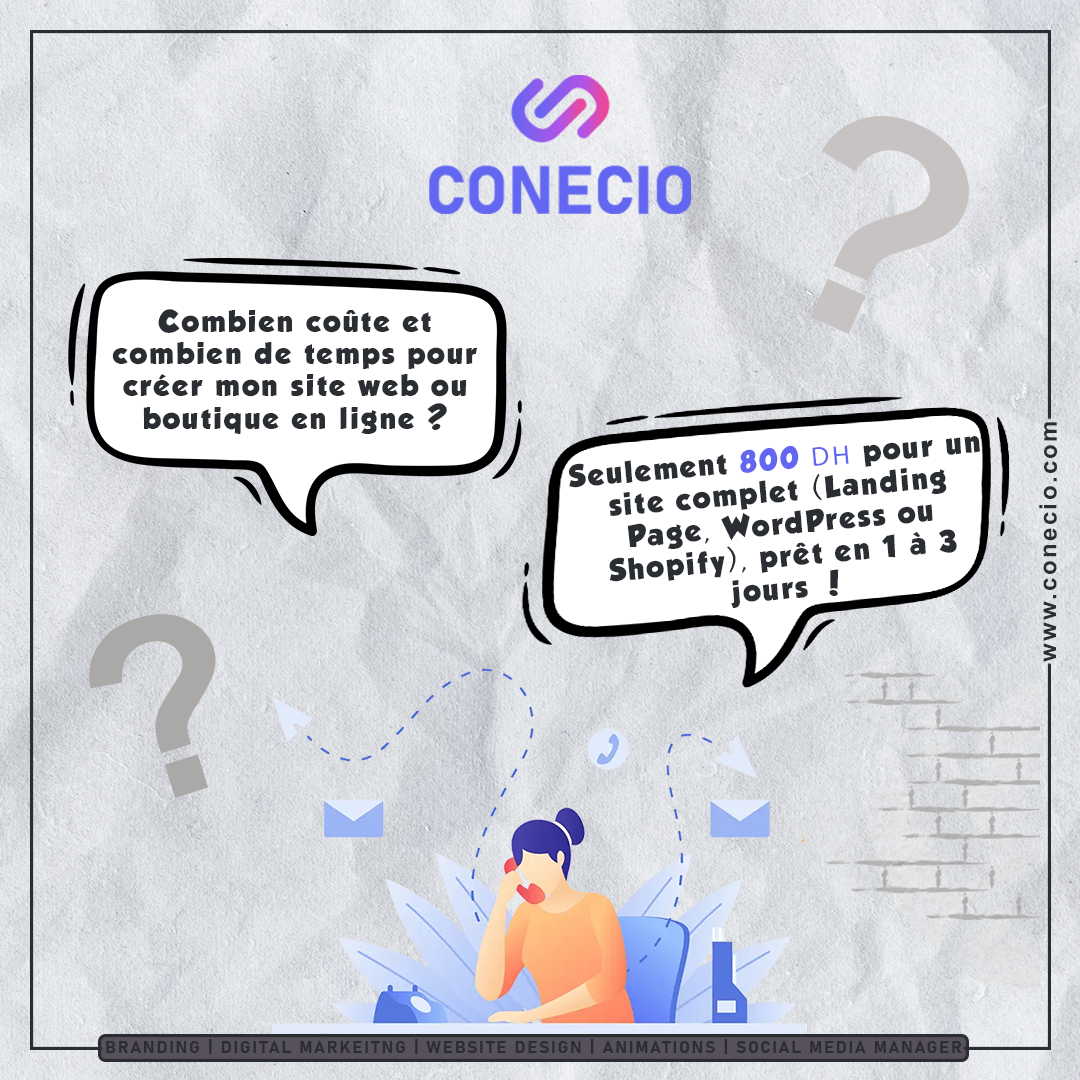
<style>
.page{position:relative;width:1080px;height:1080px}
.page>*{position:absolute;margin:0}
.t1{font:303.5px "Arial-BoldMT";letter-spacing:0.1em;color:#c8c3c3}
.t2{font:27px "GROBOLD";letter-spacing:0.1em;color:#2a2d32}
.t3{font:24px "Arial-BoldMT";letter-spacing:0.1em;color:#2a2d32}
.t4{font:27px "GROBOLD";letter-spacing:0.1em;color:#6366f1}
.t5{font:27px "MyriadPro-Regular";letter-spacing:0.1em;color:#6366f1}
.t6{font:252.8px "Arial-BoldMT";letter-spacing:0.1em;color:#aba8a8}
.t7{font:17px "Bahnschrift-Bold";letter-spacing:0.1em;color:#2a2d32}
</style>
<div class="page">
<p class="t1" style="left:810px;top:115px;width:159px;height:219px;rotate:24deg">?</p>
<p class="t2" style="left:112px;top:309px;width:366px;height:125px;text-align:center">Combien coûte et combien de temps pour créer mon site web ou boutique en ligne ?</p>
<p class="t3" style="left:1039px;top:422px;width:18px;height:240px;rotate:-90deg">www.conecio.com</p>
<p class="t2" style="left:569px;top:436px;width:411px;height:172px;rotate:-5deg">Seulement <span class="t4">800 </span><span class="t5">DH</span> pour un site complet (Landing Page, WordPress ou Shopify), prêt en 1 à 3 jours !</p>
<p class="t6" style="left:89px;top:614px;width:127px;height:184px;rotate:-17deg">?</p>
<p class="t7" style="left:106px;top:1039px;width:856px;height:15px">BRANDING | DIGITAL MARKEITNG | WEBSITE DESIGN | ANIMATIONS | SOCIAL MEDIA MANAGER</p>
</div>
